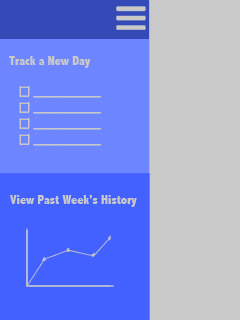
<style>
.page{position:relative;width:240px;height:320px;background:#c9c9c9}
.page>*{position:absolute;margin:0}
.t1{font:12.9px "AbadiMT-CondensedExtraBold";color:#c9c9c9}
</style>
<div class="page">
<p class="t1" style="left:9px;top:56px;width:82px;height:12px">Track a New Day</p>
<p class="t1" style="left:10px;top:195px;width:127px;height:12px">View Past Week’s History</p>
</div>
